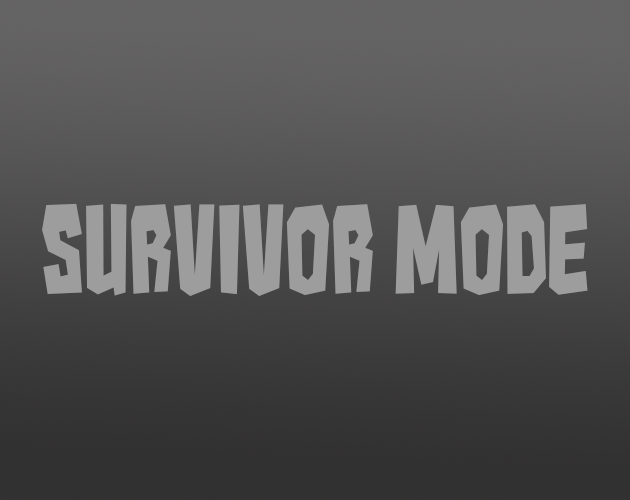
<style>
.page{position:relative;width:630px;height:500px}
.page>*{position:absolute;margin:0}
.t1{font:108.3px "Kaiju-Monster__G";color:#9d9d9d}
</style>
<div class="page">
<p class="t1" style="left:42px;top:203px;width:546px;height:93px">Survivor Mode</p>
</div>
